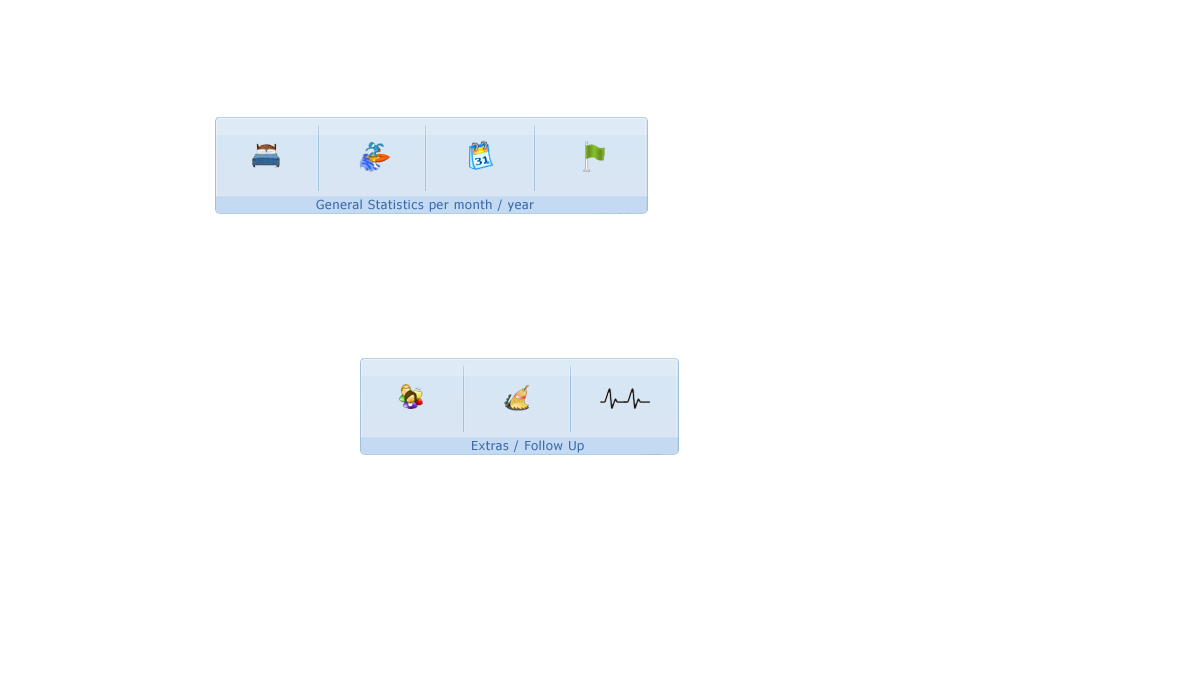
<style>
.page{position:relative;width:1200px;height:700px;background:#ffffff}
.page>*{position:absolute;margin:0}
.t1{font:12.5px "Tahoma";letter-spacing:0.06em;color:#3e6aaa}
</style>
<div class="page">
<p class="t1" style="left:316px;top:199px;width:218px;height:13px">General Statistics per month / year</p>
<p class="t1" style="left:472px;top:440px;width:112px;height:13px">Extras / Follow Up</p>
</div>
